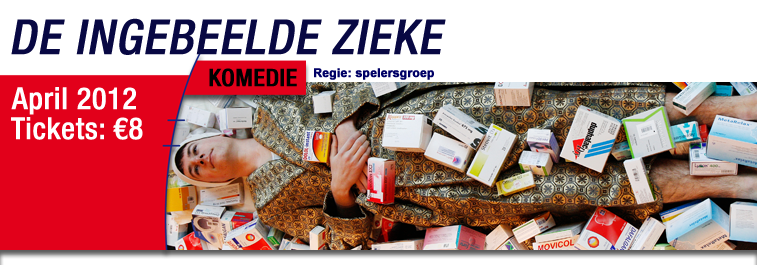
<style>
.page{position:relative;width:757px;height:265px;background:#ffffff}
.page>*{position:absolute;margin:0}
.t1{font:48px "HelveticaNeueLTCom-MdCn";color:#080843;font-weight:bold;font-style:italic}
.t2{font:24px "HelveticaNeueLTCom-MdCn";color:#000000;font-weight:bold}
.t3{font:12px "Arial-BoldMT";color:#000066;font-weight:bold}
.t4{font:30px "HelveticaNeueLTCom-MdCn";color:#ffffff;font-weight:bold}
</style>
<div class="page">
<p class="t1" style="left:11px;top:18px;width:435px;height:37px">DE INGEBEELDE ZIEKE</p>
<p class="t2" style="left:209px;top:68px;width:88px;height:19px">KOMEDIE</p>
<p class="t3" style="left:314px;top:68px;width:120px;height:12px">Regie: spelersgroep</p>
<p class="t4" style="left:11px;top:87px;width:125px;height:28px">April 2012</p>
<p class="t4" style="left:11px;top:117px;width:132px;height:23px">Tickets: €8</p>
</div>
